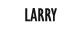
<style>
.page{position:relative;width:80px;height:30px;background:#ffffff}
.page>*{position:absolute;margin:0}
.t1{font:19.4px "GillSansMT-Condensed";color:#151515}
</style>
<div class="page">
<p class="t1" style="left:25px;top:8px;width:32px;height:14px">LARRY</p>
</div>
